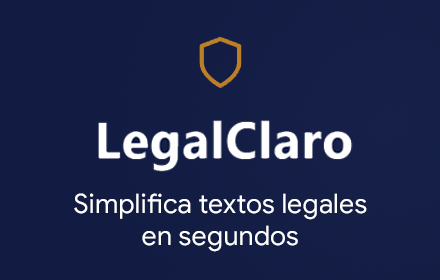
<style>
.page{position:relative;width:440px;height:280px;background:#121c43}
.page>*{position:absolute;margin:0}
.t1{font:26.8px "GoogleSans-Regular";letter-spacing:0.01em;color:#ffffff}
</style>
<div class="page">
<p class="t1" style="left:74px;top:193px;width:293px;height:59px;text-align:center">Simplifica textos legales<br>en segundos</p>
</div>
